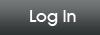
<style>
.page{position:relative;width:100px;height:35px}
.page>*{position:absolute;margin:0}
.t1{font:16px "AvantGardeLT-Medium";color:#ffffff}
</style>
<div class="page">
<p class="t1" style="left:30px;top:10px;width:46px;height:16px">Log In</p>
</div>
